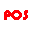
<style>
.page{position:relative;width:32px;height:32px;background:#ffffff}
.page>*{position:absolute;margin:0}
.t1{font:15px "Bauhaus93";color:#ff0006}
</style>
<div class="page">
<p class="t1" style="left:4px;top:10px;width:24px;height:10px">POS</p>
</div>
